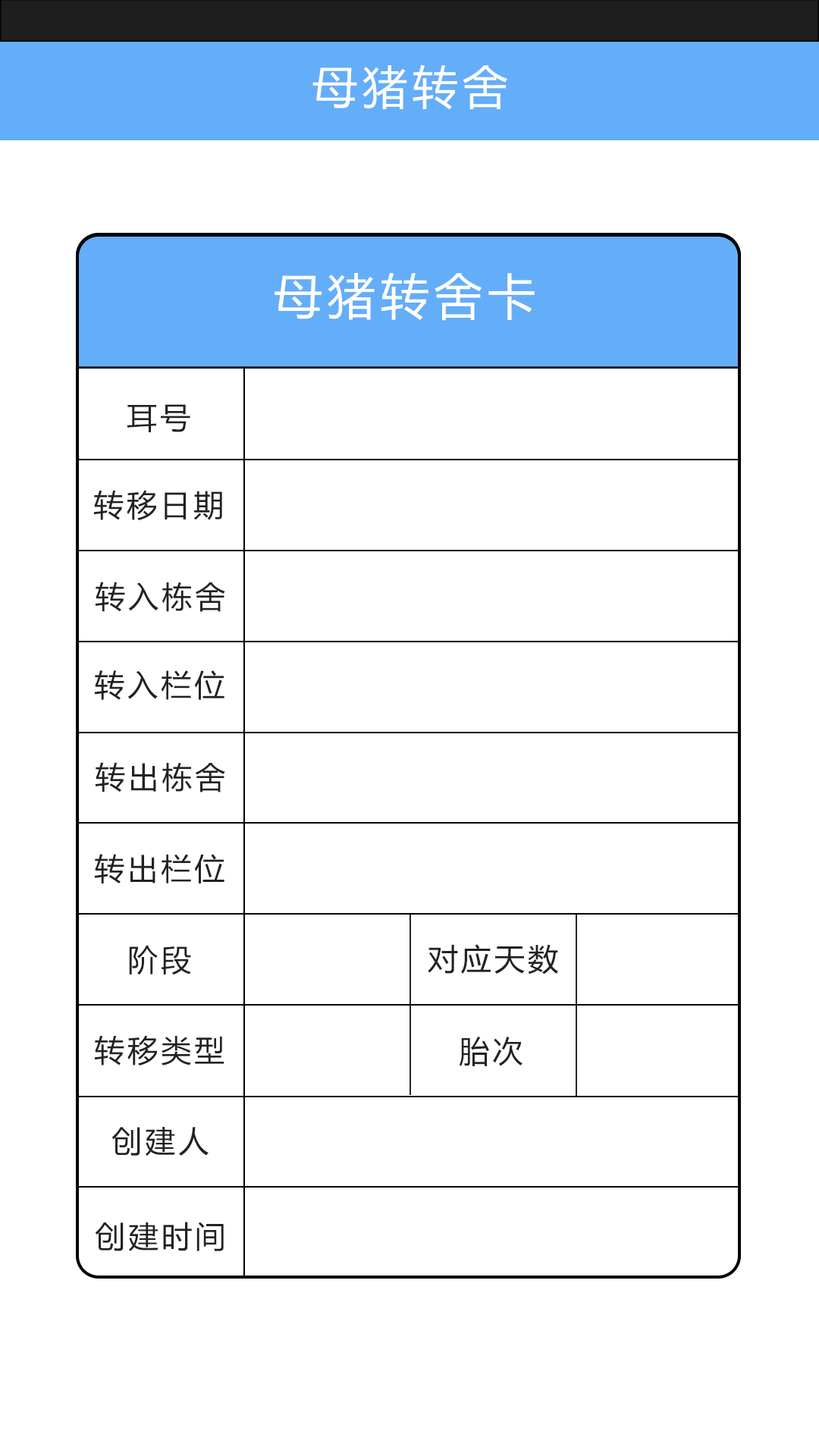
<style>
.page{position:relative;width:819px;height:1456px;background:#ffffff}
.page>*{position:absolute;margin:0}
.t1{font:45.5px "MicrosoftYaHei";letter-spacing:0.1em;color:#ffffff}
.t2{font:48.5px "MicrosoftYaHei";letter-spacing:0.1em;color:#ffffff}
.t3{font:30.3px "MicrosoftYaHei";letter-spacing:0.1em;color:#222222}
</style>
<div class="page">
<p class="t1" style="left:312px;top:64px;width:195px;height:46px">母猪转舍</p>
<p class="t2" style="left:275px;top:272px;width:260px;height:49px">母猪转舍卡</p>
<p class="t3" style="left:127px;top:404px;width:63px;height:28px">耳号</p>
<p class="t3" style="left:93px;top:490px;width:129px;height:30px">转移日期</p>
<p class="t3" style="left:95px;top:582px;width:130px;height:30px">转入栋舍</p>
<p class="t3" style="left:94px;top:670px;width:130px;height:30px">转入栏位</p>
<p class="t3" style="left:95px;top:762px;width:130px;height:30px">转出栋舍</p>
<p class="t3" style="left:94px;top:854px;width:130px;height:29px">转出栏位</p>
<p class="t3" style="left:129px;top:945px;width:62px;height:30px">阶段</p>
<p class="t3" style="left:428px;top:944px;width:130px;height:30px">对应天数</p>
<p class="t3" style="left:94px;top:1035px;width:130px;height:30px">转移类型</p>
<p class="t3" style="left:459px;top:1037px;width:63px;height:29px">胎次</p>
<p class="t3" style="left:111px;top:1127px;width:98px;height:29px">创建人</p>
<p class="t3" style="left:95px;top:1222px;width:129px;height:29px">创建时间</p>
</div>
